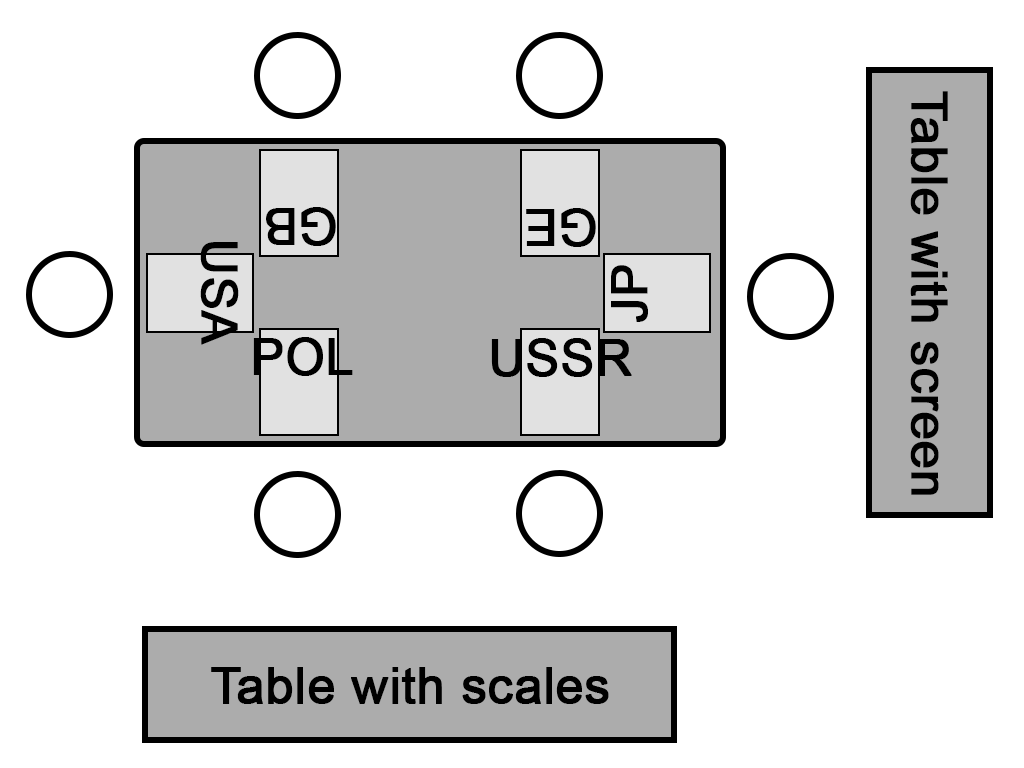
<style>
.page{position:relative;width:1024px;height:768px;background:#ffffff}
.page>*{position:absolute;margin:0}
.t1{font:49.9px "ArialMT";color:#000000;font-weight:bold}
.t2{font:50px "ArialMT";color:#000000;font-weight:bold}
</style>
<div class="page">
<p class="t1" style="left:910px;top:91px;width:38px;height:404px;rotate:90deg">Table with screen</p>
<p class="t1" style="left:266px;top:207px;width:70px;height:39px;rotate:180deg">GB</p>
<p class="t1" style="left:526px;top:208px;width:70px;height:39px;rotate:180deg">GE</p>
<p class="t1" style="left:200px;top:242px;width:39px;height:103px;rotate:90deg">USA</p>
<p class="t1" style="left:611px;top:265px;width:37px;height:57px;rotate:-90deg">JP</p>
<p class="t1" style="left:253px;top:337px;width:100px;height:39px">POL</p>
<p class="t1" style="left:491px;top:338px;width:141px;height:39px">USSR</p>
<p class="t2" style="left:211px;top:667px;width:398px;height:37px">Table with scales</p>
</div>
